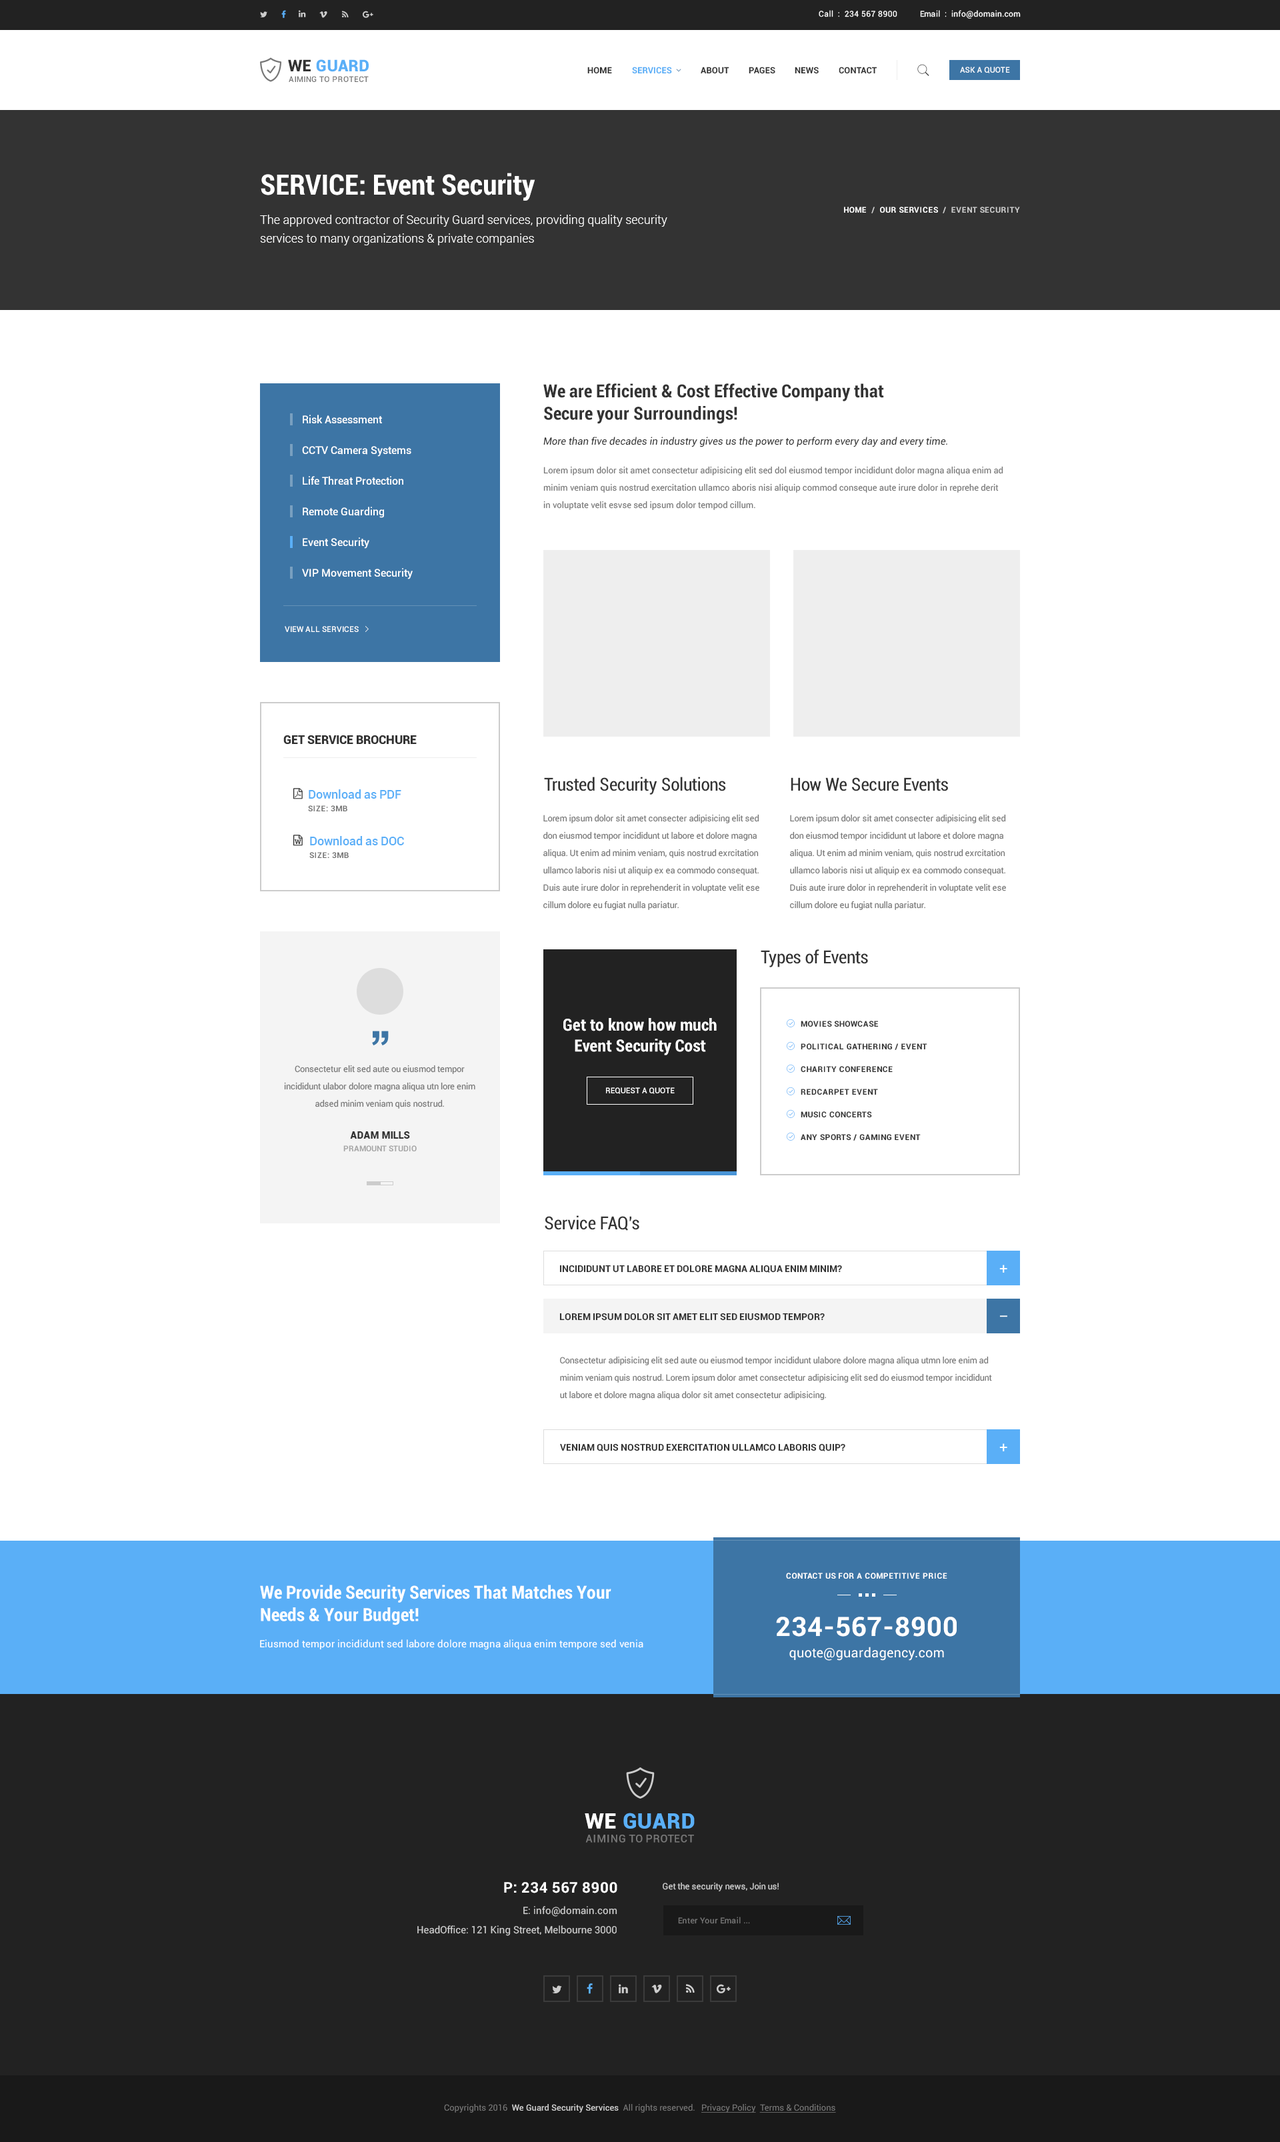
<style>
.page{position:relative;width:1280px;height:2142px;background:#ffffff}
.page>*{position:absolute;margin:0}
.t1{font:8px "Roboto-Regular";letter-spacing:0.025em;color:#ffffff}
.t2{font:16px "Roboto-Black";letter-spacing:0.025em;color:#5aaff7;text-transform:uppercase}
.t3{font:16px "Roboto-Black";letter-spacing:0.025em;color:#333333;text-transform:uppercase}
.t4{font:8px "Roboto-Medium";letter-spacing:0.035em;color:#777777;text-transform:uppercase}
.t5{font:8.7px "Roboto-Bold";letter-spacing:0.01em;color:#333333;text-transform:uppercase}
.t6{font:8.7px "Roboto-Bold";letter-spacing:0.01em;color:#5aaff7;text-transform:uppercase}
.t7{font:8px "Roboto-Medium";color:#ffffff;text-transform:uppercase}
.t8{font:29.3px "Roboto-BoldCondensed";color:#ffffff}
.t9{font:8px "Roboto-Bold";letter-spacing:0.04em;color:#cccccc;text-transform:uppercase}
.t10{font:8px "Roboto-Bold";letter-spacing:0.04em;color:#ffffff;text-transform:uppercase}
.t11{font:12px/18.7px "Roboto-Light";color:#ffffff}
.t12{font:18.7px "Roboto-BoldCondensed";color:#333333}
.t13{font:10.7px "Roboto-Medium";color:#ffffff}
.t14{font:10px "Roboto-Italic";color:#333333}
.t15{font:8.7px/17.3px "Roboto-Regular";color:#777777}
.t16{font:12px "Roboto-Black";color:#333333;text-transform:uppercase}
.t17{font:18.7px "Roboto-Condensed";color:#333333}
.t18{font:12px "Roboto-Medium";color:#5aaff7}
.t19{font:8px "Roboto-Bold";letter-spacing:0.04em;color:#777777;text-transform:uppercase}
.t20{font:17.3px "Roboto-BoldCondensed";color:#ffffff}
.t21{font:8px "Roboto-Bold";letter-spacing:0.04em;color:#333333;text-transform:uppercase}
.t22{font:10px "Roboto-Black";color:#333333;text-transform:uppercase}
.t23{font:8px "Roboto-Bold";color:#a6a6a6;text-transform:uppercase}
.t24{font:9.3px "Roboto-Bold";color:#333333;text-transform:uppercase}
.t25{font:18.7px "Roboto-BoldCondensed";color:#ffffff}
.t26{font:26.7px "Roboto-Bold";letter-spacing:0.025em;color:#ffffff}
.t27{font:10px "Roboto-Regular";color:#ffffff}
.t28{font:13.3px "Roboto-Regular";letter-spacing:0.025em;color:#ffffff}
.t29{font:21.3px "Roboto-Black";letter-spacing:0.025em;color:#5aaff7;text-transform:uppercase}
.t30{font:21.3px "Roboto-Black";letter-spacing:0.025em;color:#ffffff;text-transform:uppercase}
.t31{font:10.7px "Roboto-Medium";letter-spacing:0.035em;color:#777777;text-transform:uppercase}
.t32{font:14.7px "Roboto-Bold";letter-spacing:0.025em;color:#ffffff}
.t33{font:8.7px "Roboto-Regular";color:#cccccc}
.t34{font:10px "Roboto-Regular";color:#cccccc}
.t35{font:8px "Roboto-Regular";letter-spacing:0.04em;color:#777777}
.t36{font:8.7px "Roboto-Medium";color:#cccccc}
.t37{font:8.7px "Roboto-Regular";color:#777777}
.t38{font:8.7px "Roboto-Regular";color:#777777;text-decoration:underline}
</style>
<div class="page">
<p class="t1" style="left:819px;top:10px;width:78px;height:7px">Call  :  234 567 8900</p>
<p class="t1" style="left:920px;top:10px;width:101px;height:9px">Email  :  info@domain.com</p>
<p class="t2" style="left:288px;top:59px;width:81px;height:13px"><span class="t3">we </span>Guard</p>
<p class="t4" style="left:289px;top:76px;width:80px;height:6px">aiming to protect</p>
<p class="t5" style="left:587px;top:67px;width:25px;height:7px">Home</p>
<p class="t6" style="left:632px;top:67px;width:40px;height:7px">Services</p>
<p class="t5" style="left:701px;top:67px;width:28px;height:7px">About</p>
<p class="t5" style="left:749px;top:67px;width:26px;height:7px">pages</p>
<p class="t5" style="left:795px;top:67px;width:24px;height:7px">news</p>
<p class="t5" style="left:839px;top:67px;width:38px;height:7px">Contact</p>
<p class="t7" style="left:960px;top:67px;width:50px;height:6px">ask a quote</p>
<p class="t8" style="left:261px;top:173px;width:274px;height:28px">SERVICE: Event Security</p>
<p class="t9" style="left:844px;top:207px;width:176px;height:6px"><span class="t10">home</span>  /  <span class="t10">our services</span>  /  event security</p>
<p class="t11" style="left:260px;top:215px;width:407px;height:30px">The approved contractor of Security Guard services, providing quality security<br>services to many organizations &amp; private companies</p>
<p class="t12" style="left:543px;top:383px;width:341px;height:41px">We are Efficient &amp; Cost Effective Company that<br>Secure your Surroundings!</p>
<p class="t13" style="left:303px;top:415px;width:79px;height:8px">Risk Assessment</p>
<p class="t14" style="left:543px;top:437px;width:404px;height:10px">More than five decades in industry gives us the power to perform every day and every time.</p>
<p class="t13" style="left:302px;top:446px;width:109px;height:11px">CCTV Camera Systems</p>
<p class="t15" style="left:543px;top:466px;width:460px;height:44px">Lorem ipsum dolor sit amet consectetur adipisicing elit sed dol eiusmod tempor incididunt dolor magna aliqua enim ad <br>minim veniam quis nostrud exercitation ullamco aboris nisi aliquip commod conseque aute irure dolor in reprehe derit <br>in voluptate velit esvse sed ipsum dolor tempod cillum.</p>
<p class="t13" style="left:303px;top:476px;width:100px;height:9px">Life Threat Protection</p>
<p class="t13" style="left:303px;top:507px;width:81px;height:11px">Remote Guarding</p>
<p class="t13" style="left:303px;top:537px;width:66px;height:12px">Event Security</p>
<p class="t13" style="left:302px;top:568px;width:111px;height:11px">VIP Movement Security</p>
<p class="t7" style="left:285px;top:626px;width:74px;height:6px">View All Services</p>
<p class="t16" style="left:283px;top:735px;width:134px;height:10px">get service brochure</p>
<p class="t17" style="left:544px;top:777px;width:182px;height:18px">Trusted Security Solutions</p>
<p class="t17" style="left:791px;top:777px;width:157px;height:14px">How We Secure Events</p>
<p class="t18" style="left:309px;top:789px;width:92px;height:10px">Download as PDF</p>
<p class="t19" style="left:308px;top:805px;width:39px;height:6px">size: 3mb</p>
<p class="t15" style="left:543px;top:814px;width:216px;height:96px">Lorem ipsum dolor sit amet consecter adipisicing elit sed<br>don eiusmod tempor incididunt ut labore et dolore magna<br>aliqua. Ut enim ad minim veniam, quis nostrud exrcitation<br>ullamco laboris nisi ut aliquip ex ea commodo consequat.<br>Duis aute irure dolor in reprehenderit in voluptate velit ese<br>cillum dolore eu fugiat nulla pariatur.</p>
<p class="t15" style="left:789px;top:814px;width:217px;height:96px">Lorem ipsum dolor sit amet consecter adipisicing elit sed<br>don eiusmod tempor incididunt ut labore et dolore magna<br>aliqua. Ut enim ad minim veniam, quis nostrud exrcitation<br>ullamco laboris nisi ut aliquip ex ea commodo consequat.<br>Duis aute irure dolor in reprehenderit in voluptate velit ese<br>cillum dolore eu fugiat nulla pariatur.</p>
<p class="t18" style="left:310px;top:836px;width:94px;height:9px">Download as DOC</p>
<p class="t19" style="left:309px;top:852px;width:40px;height:6px">size: 3mb</p>
<p class="t17" style="left:761px;top:949px;width:107px;height:18px">Types of Events</p>
<p class="t20" style="left:563px;top:1018px;width:154px;height:37px;text-align:center">Get to know how much<br>Event Security Cost</p>
<p class="t21" style="left:801px;top:1021px;width:78px;height:6px">Movies Showcase</p>
<p class="t21" style="left:801px;top:1043px;width:126px;height:7px">Political Gathering / event</p>
<p class="t15" style="left:284px;top:1065px;width:191px;height:44px;text-align:center">Consectetur elit sed aute ou eiusmod tempor<br>incididunt ulabor dolore magna aliqua utn lore enim<br>adsed minim veniam quis nostrud.</p>
<p class="t21" style="left:801px;top:1066px;width:92px;height:7px">charity conference</p>
<p class="t7" style="left:606px;top:1087px;width:69px;height:7px">request a quote</p>
<p class="t21" style="left:801px;top:1089px;width:77px;height:6px">redcarpet event</p>
<p class="t21" style="left:801px;top:1111px;width:71px;height:7px">music concerts</p>
<p class="t22" style="left:350px;top:1131px;width:60px;height:8px">Adam mills</p>
<p class="t21" style="left:801px;top:1134px;width:120px;height:7px">any sports / gaming event</p>
<p class="t23" style="left:343px;top:1145px;width:74px;height:6px">pramount studio</p>
<p class="t17" style="left:545px;top:1215px;width:94px;height:16px">Service FAQ’s</p>
<p class="t24" style="left:559px;top:1265px;width:283px;height:8px">incididunt ut labore et dolore magna aliqua enim minim?</p>
<p class="t24" style="left:559px;top:1313px;width:266px;height:8px">Lorem ipsum dolor sit amet elit sed eiusmod tempor?</p>
<p class="t15" style="left:560px;top:1356px;width:432px;height:44px">Consectetur adipisicing elit sed aute ou eiusmod tempor incididunt ulabore dolore magna aliqua utmn lore enim ad<br>minim veniam quis nostrud. Lorem ipsum dolor amet consectetur adipisicing elit sed do eiusmod tempor incididunt<br>ut labore et dolore magna aliqua dolor sit amet consectetur adipisicing.</p>
<p class="t24" style="left:560px;top:1443px;width:285px;height:8px">veniam quis nostrud exercitation ullamco laboris quip?</p>
<p class="t10" style="left:786px;top:1573px;width:161px;height:6px">contact us for a competitive price</p>
<p class="t25" style="left:260px;top:1585px;width:351px;height:40px">We Provide Security Services That Matches Your <br>Needs &amp; Your Budget!</p>
<p class="t26" style="left:776px;top:1617px;width:181px;height:20px">234-567-8900</p>
<p class="t27" style="left:260px;top:1639px;width:383px;height:11px">Eiusmod tempor incididunt sed labore dolore magna aliqua enim tempore sed venia</p>
<p class="t28" style="left:789px;top:1647px;width:155px;height:14px">quote@guardagency.com</p>
<p class="t29" style="left:585px;top:1813px;width:110px;height:16px"><span class="t30">we </span>Guard</p>
<p class="t31" style="left:585px;top:1835px;width:109px;height:8px">aiming to protect</p>
<p class="t32" style="left:504px;top:1882px;width:113px;height:11px">P: 234 567 8900</p>
<p class="t33" style="left:663px;top:1882px;width:116px;height:9px">Get the security news, Join us!</p>
<p class="t34" style="left:523px;top:1906px;width:94px;height:11px">E: info@domain.com</p>
<p class="t34" style="left:417px;top:1925px;width:200px;height:11px">HeadOffice: 121 King Street, Melbourne 3000</p>
<p class="t35" style="left:678px;top:1917px;width:72px;height:7px">Enter Your Email ...</p>
<p class="t36" style="left:444px;top:2104px;width:251px;height:9px"><span class="t37">Copyrights 2016  </span>We Guard Security Services  <span class="t37">All rights reserved.</span></p>
<p class="t38" style="left:701px;top:2104px;width:135px;height:9px">Privacy Policy  Terms &amp; Conditions</p>
</div>
